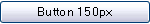
<style>
.page{position:relative;width:150px;height:24px;background:#ffffff}
.page>*{position:absolute;margin:0}
.t1{font:12px "MicrosoftSansSerif";letter-spacing:0.025em;color:#000000}
</style>
<div class="page">
<p class="t1" style="left:38px;top:7px;width:74px;height:11px">Button 150px</p>
</div>
